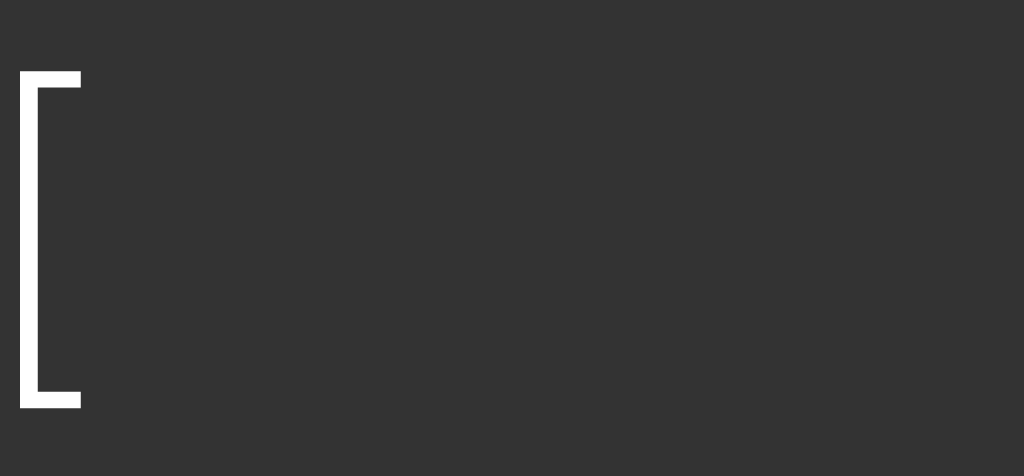
<style>
.page{position:relative;width:1024px;height:476px;background:#333333}
.page>*{position:absolute;margin:0}
.t1{font:362.8px "MicrosoftYaHeiLight";color:#ffffff}
</style>
<div class="page">
<p class="t1" style="left:20px;top:71px;width:61px;height:338px">[</p>
</div>
